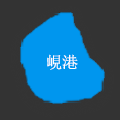
<style>
.page{position:relative;width:120px;height:120px;background:#333333}
.page>*{position:absolute;margin:0}
.t1{font:16px "SimSun";color:#ffffff}
</style>
<div class="page">
<p class="t1" style="left:47px;top:54px;width:31px;height:16px">峴港</p>
</div>
